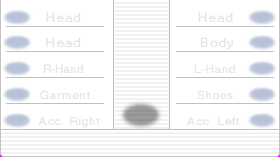
<style>
.page{position:relative;width:280px;height:157px;background:#ffffff}
.page>*{position:absolute;margin:0}
.t1{font:11.5px "MS Sans Serif";letter-spacing:0.05em;color:#e1e4e9;scale:1.21 1}
.t2{font:11.5px "MS Sans Serif";letter-spacing:0.05em;color:#e1e4e9;scale:0.95 1}
.t3{font:11.5px "MS Sans Serif";letter-spacing:0.05em;color:#e1e4e9}
.t4{font:11.5px "MS Sans Serif";letter-spacing:0.05em;color:#e1e4e9;scale:1.04 1}
.t5{font:11.5px "MS Sans Serif";letter-spacing:0.05em;color:#e1e4e9;scale:1.06 1}
</style>
<div class="page">
<p class="t1" style="left:46px;top:12px;width:35px;height:10px">Head</p>
<p class="t1" style="left:198px;top:12px;width:35px;height:10px">Head</p>
<p class="t1" style="left:46px;top:37px;width:35px;height:10px">Head</p>
<p class="t1" style="left:200px;top:37px;width:33px;height:12px">Body</p>
<p class="t2" style="left:43px;top:64px;width:40px;height:9px">R-Hand</p>
<p class="t3" style="left:194px;top:64px;width:41px;height:9px">L-Hand</p>
<p class="t4" style="left:40px;top:90px;width:50px;height:9px">Garment</p>
<p class="t4" style="left:197px;top:90px;width:36px;height:9px">Shoes</p>
<p class="t5" style="left:38px;top:117px;width:62px;height:11px">Acc. Right</p>
<p class="t5" style="left:186px;top:117px;width:54px;height:8px">Acc. Left</p>
</div>
